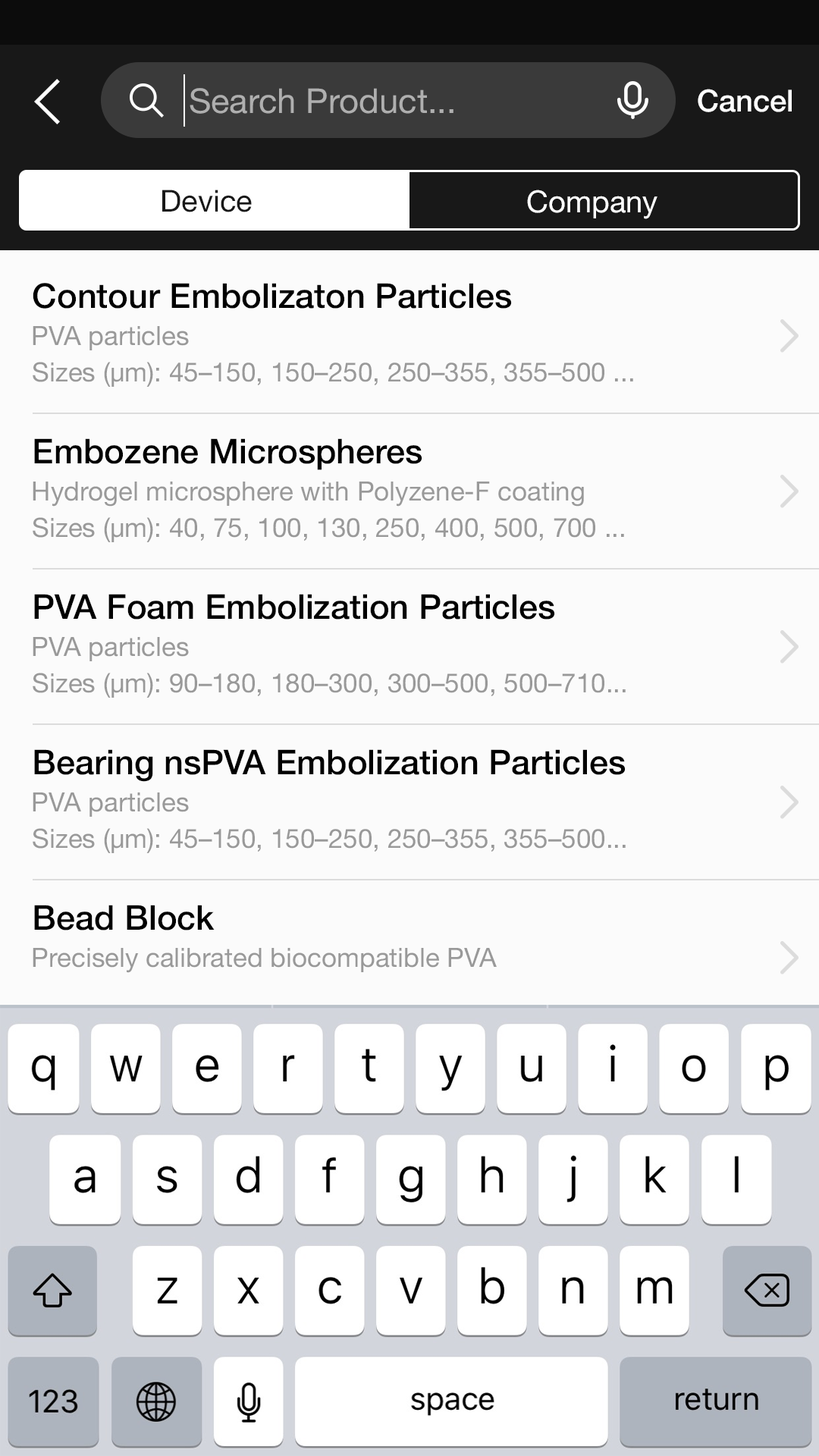
<style>
.page{position:relative;width:819px;height:1456px;background:#fbfbfb}
.page>*{position:absolute;margin:0}
.t1{font:34.1px "HelveticaNeue";color:#afafaf}
.t2{font:30.4px "HelveticaNeue-Medium";color:#ffffff}
.t3{font:30.3px "HelveticaNeue";color:#181818}
.t4{font:30.3px "HelveticaNeue";color:#ffffff}
.t5{font:34.1px "HelveticaNeue-Medium";color:#000000}
.t6{font:26.5px "HelveticaNeue";color:#999999}
</style>
<div class="page">
<p class="t1" style="left:190px;top:88px;width:263px;height:26px">Search Product...</p>
<p class="t2" style="left:698px;top:89px;width:94px;height:23px">Cancel</p>
<p class="t3" style="left:162px;top:190px;width:90px;height:22px">Device</p>
<p class="t4" style="left:527px;top:190px;width:130px;height:29px">Company</p>
<p class="t5" style="left:33px;top:283px;width:479px;height:26px">Contour Embolizaton Particles</p>
<p class="t6" style="left:33px;top:326px;width:156px;height:24px">PVA particles</p>
<p class="t6" style="left:33px;top:362px;width:600px;height:25px">Sizes (µm): 45–150, 150–250, 250–355, 355–500 ...</p>
<p class="t5" style="left:34px;top:438px;width:388px;height:32px">Embozene Microspheres</p>
<p class="t6" style="left:33px;top:482px;width:551px;height:25px">Hydrogel microsphere with Polyzene-F coating</p>
<p class="t6" style="left:33px;top:517px;width:591px;height:25px">Sizes (µm): 40, 75, 100, 130, 250, 400, 500, 700 ...</p>
<p class="t5" style="left:34px;top:594px;width:521px;height:26px">PVA Foam Embolization Particles</p>
<p class="t6" style="left:33px;top:637px;width:156px;height:24px">PVA particles</p>
<p class="t6" style="left:33px;top:673px;width:593px;height:25px">Sizes (µm): 90–180, 180–300, 300–500, 500–710...</p>
<p class="t5" style="left:34px;top:749px;width:592px;height:33px">Bearing nsPVA Embolization Particles</p>
<p class="t6" style="left:33px;top:792px;width:156px;height:25px">PVA particles</p>
<p class="t6" style="left:33px;top:828px;width:593px;height:25px">Sizes (µm): 45–150, 150–250, 250–355, 355–500...</p>
<p class="t5" style="left:34px;top:905px;width:181px;height:25px">Bead Block</p>
<p class="t6" style="left:33px;top:948px;width:464px;height:25px">Precisely calibrated biocompatible PVA</p>
</div>
